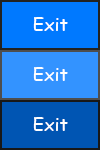
<style>
.page{position:relative;width:100px;height:150px;background:#3393ff}
.page>*{position:absolute;margin:0}
.t1{font:18px "ComicSansMS";color:#ffffff}
</style>
<div class="page">
<p class="t1" style="left:33px;top:17px;width:35px;height:14px">Exit</p>
<p class="t1" style="left:33px;top:67px;width:35px;height:14px">Exit</p>
<p class="t1" style="left:33px;top:117px;width:35px;height:14px">Exit</p>
</div>
